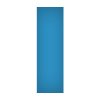
<style>
.page{position:relative;width:100px;height:100px;background:#ffffff}
.page>*{position:absolute;margin:0}
.t1{font:120px "Arial-Black";color:#2a86b6}
</style>
<div class="page">
<p class="t1" style="left:36px;top:7px;width:28px;height:86px">I</p>
</div>
